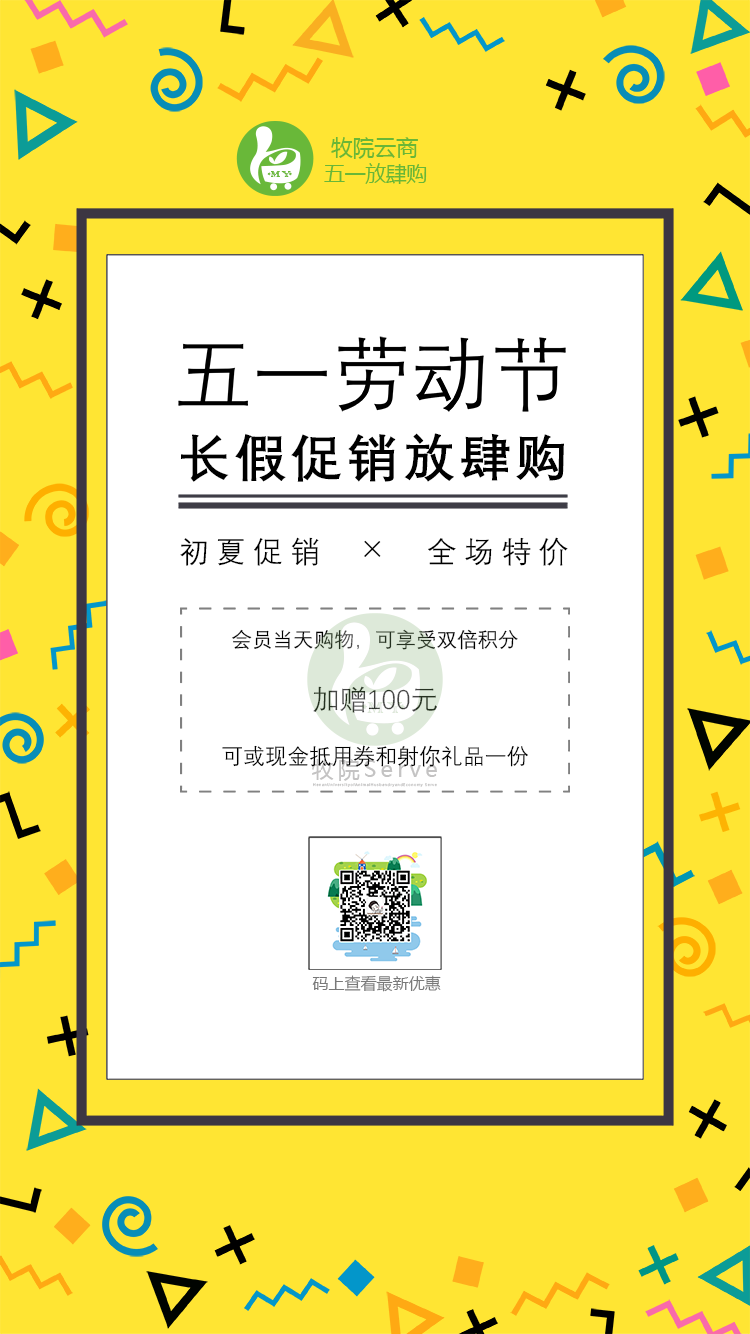
<style>
.page{position:relative;width:750px;height:1334px;background:#ffe533}
.page>*{position:absolute;margin:0}
.t1{font:21.8px "MicrosoftYaHei";color:#69b737}
.t2{font:11.9px "ColonnaMT";letter-spacing:0.18em;color:#69b737}
.t3{font:20.6px "MicrosoftYaHei";color:#69b737}
.t4{font:51.2px "DengXian-Bold";letter-spacing:0.096em;color:#000000}
.t5{font:29.7px "DengXian";letter-spacing:0.252em;color:#000000}
.t6{font:41px "DengXian-Light";letter-spacing:0.252em;color:#000000}
.t7{font:20.5px "DengXian"}
.t8{font:27.5px "DengXian"}
.t9{font:21.9px "DengXian";color:#000000}
.t10{font:22.2px "MicrosoftYaHei";letter-spacing:0.18em;color:#c4c3c3}
.t11{font:3.5px "MicrosoftYaHei";letter-spacing:0.18em;color:#c4c3c3}
.t12{font:16.1px "MicrosoftYaHei";color:#797979}
</style>
<div class="page">
<p class="t1" style="left:331px;top:137px;width:87px;height:22px">牧院云商</p>
<p class="t2" style="left:271px;top:171px;width:20px;height:6px">MY</p>
<p class="t3" style="left:324px;top:163px;width:103px;height:21px">五一放肆购</p>
<p class="t4" style="left:181px;top:433px;width:383px;height:49px">长假促销放肆购</p>
<p class="t5" style="left:180px;top:537px;width:388px;height:29px">初夏促销  <span class="t6">×  </span>全场特价</p>
<p class="t7" style="left:232px;top:629px;width:286px;height:21px">会员当天购物，可享受双倍积分</p>
<p class="t8" style="left:313px;top:686px;width:124px;height:27px">加赠100元</p>
<p class="t9" style="left:222px;top:745px;width:306px;height:22px">可或现金抵用券和射你礼品一份</p>
<p class="t10" style="left:312px;top:759px;width:125px;height:22px">牧院Serve</p>
<p class="t11" style="left:313px;top:783px;width:124px;height:4px">HenanUniversityofAnimalHusbandryandEconomy Serve</p>
<p class="t12" style="left:312px;top:975px;width:129px;height:17px">码上查看最新优惠</p>
</div>
